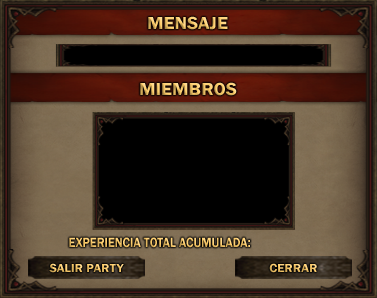
<style>
.page{position:relative;width:377px;height:298px;background:#000000}
.page>*{position:absolute;margin:0}
.t1{font:18px "FranklinGothic-Demi";scale:1.07 1}
.t2{font:14px "FranklinGothic-Demi";scale:0.86 1}
.t3{font:12px "FranklinGothic-Demi";scale:1.07 1}
</style>
<div class="page">
<p class="t1" style="left:148px;top:16px;width:80px;height:14px">MENSAJE</p>
<p class="t1" style="left:140px;top:82px;width:97px;height:14px">MIEMBROSS</p>
<p class="t2" style="left:69px;top:237px;width:181px;height:11px">EXPERIENCIA TOTAL ACUMULADA:</p>
<p class="t3" style="left:49px;top:263px;width:75px;height:10px">SALIR PARTY</p>
<p class="t3" style="left:269px;top:263px;width:48px;height:10px">CERRAR</p>
</div>
